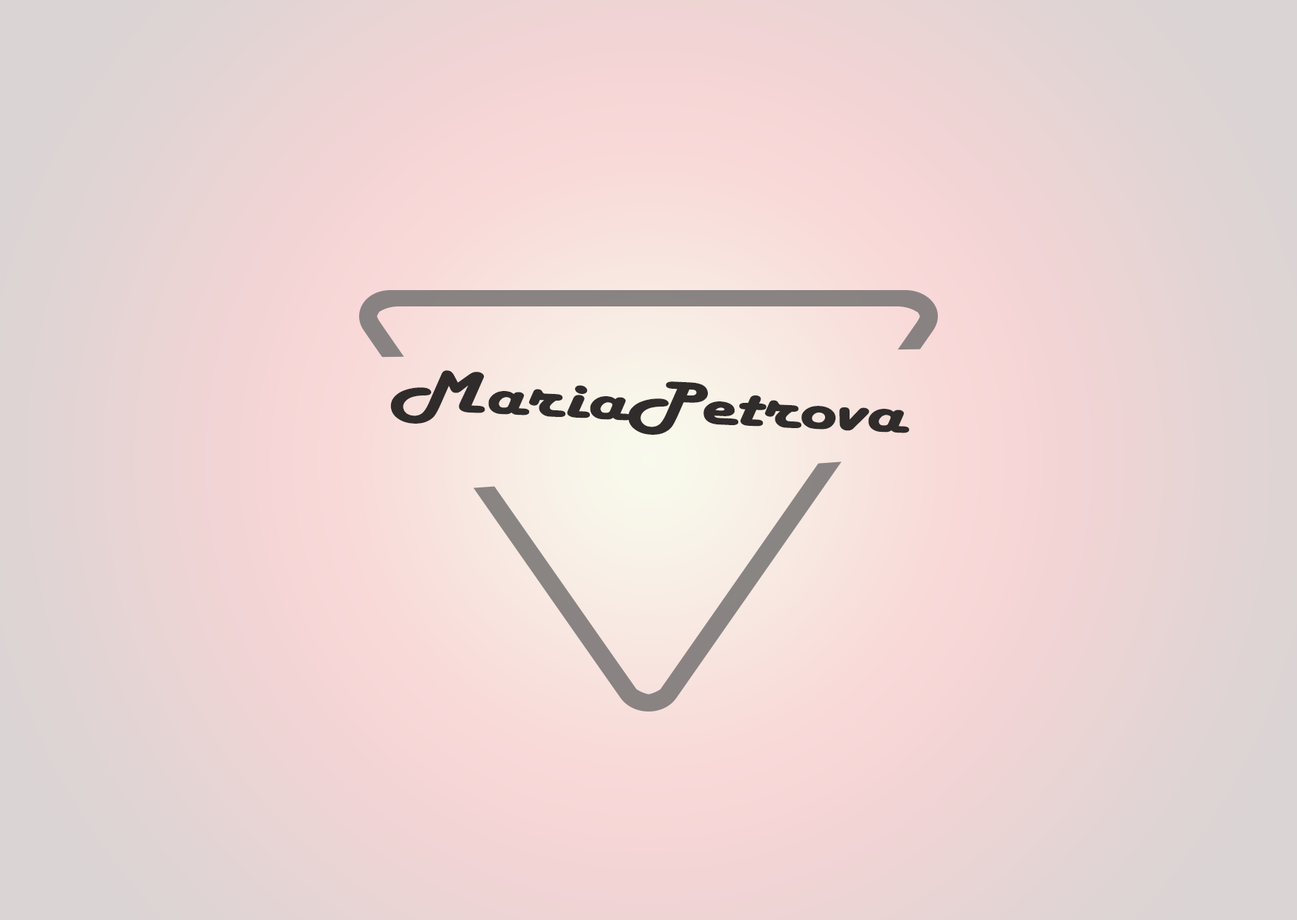
<style>
.page{position:relative;width:1297px;height:920px}
.page>*{position:absolute;margin:0}
.t1{font:61.8px "HarlowSolid";color:#302c2c;scale:1.44 1}
</style>
<div class="page">
<p class="t1" style="left:390px;top:370px;width:519px;height:65px;rotate:3deg">MariaPetrova</p>
</div>
